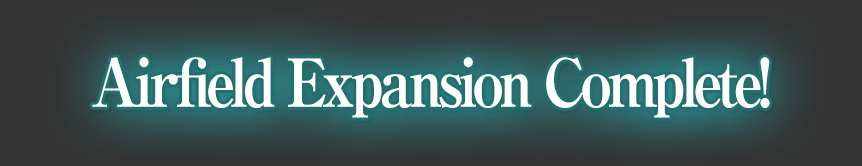
<style>
.page{position:relative;width:862px;height:166px}
.page>*{position:absolute;margin:0}
.t1{font:66px "RyuminPro-ExBold";letter-spacing:-0.08em;color:#ffffff;scale:0.9 1}
</style>
<div class="page">
<p class="t1" style="left:92px;top:57px;width:678px;height:61px">Airfield Expansion Complete!</p>
</div>
